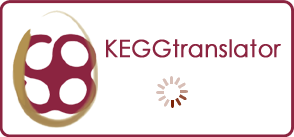
<style>
.page{position:relative;width:294px;height:137px;background:#ffffff}
.page>*{position:absolute;margin:0}
.t1{font:24px "CenturyGothic";color:#8b2440;font-weight:bold;scale:0.95 1}
</style>
<div class="page">
<p class="t1" style="left:106px;top:39px;width:175px;height:19px">KEGGtranslator</p>
</div>
